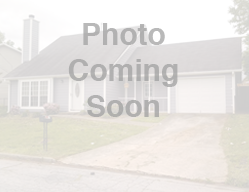
<style>
.page{position:relative;width:249px;height:192px}
.page>*{position:absolute;margin:0}
.t1{font:30px "Helvetica-Bold";color:#a0a0a0}
</style>
<div class="page">
<p class="t1" style="left:68px;top:23px;width:110px;height:94px;text-align:center;opacity:0.74">Photo<br>Coming<br>Soon</p>
</div>
